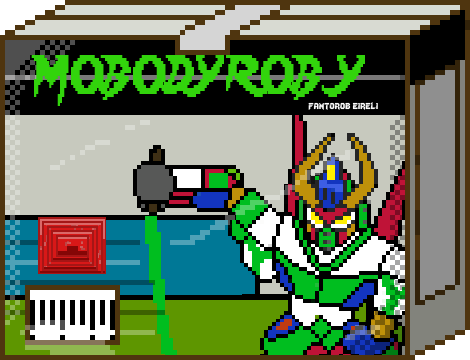
<style>
.page{position:relative;width:470px;height:360px}
.page>*{position:absolute;margin:0}
.t1{font:48px "Lady-Radical";color:#32d40c;scale:0.72 1}
.t2{font:12px "Lady-Radical";color:#fbfbfb}
</style>
<div class="page">
<p class="t1" style="left:31px;top:55px;width:334px;height:51px">MOBODYROB  Y</p>
<p class="t2" style="left:308px;top:102px;width:70px;height:8px">fantorob eireli</p>
</div>
